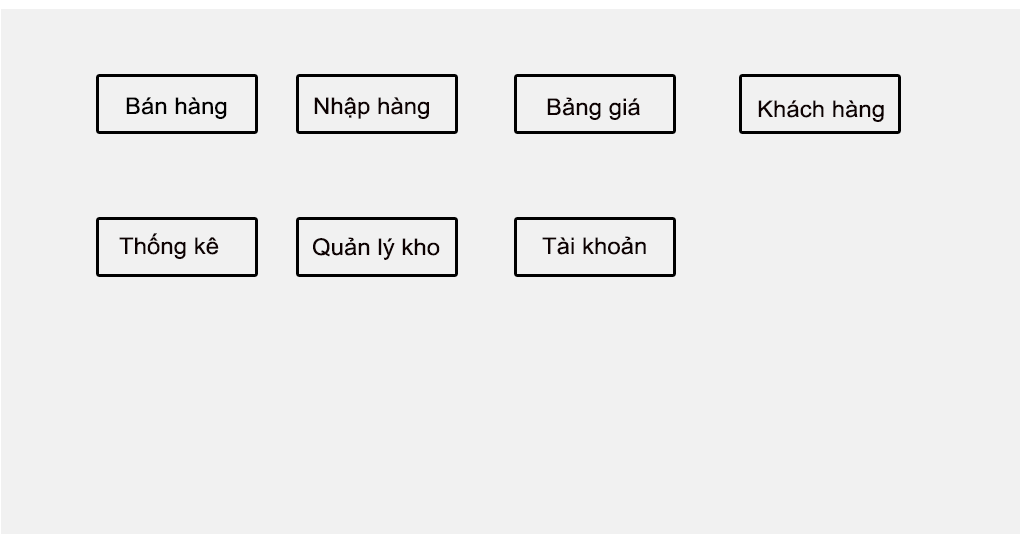
<style>
.page{position:relative;width:1020px;height:534px;background:#f1f1f1}
.page>*{position:absolute;margin:0}
.t1{font:23px "ArialMT";color:#000000;scale:1.04 1}
.t2{font:23px "ArialMT";color:#0e0202;scale:1.04 1}
</style>
<div class="page">
<p class="t1" style="left:126px;top:97px;width:101px;height:22px">Bán hàng</p>
<p class="t2" style="left:314px;top:97px;width:115px;height:22px">Nhập hàng</p>
<p class="t2" style="left:547px;top:97px;width:93px;height:23px">Bảng giá</p>
<p class="t2" style="left:758px;top:100px;width:126px;height:22px">Khách hàng</p>
<p class="t2" style="left:119px;top:233px;width:100px;height:26px">Thống kê</p>
<p class="t2" style="left:313px;top:237px;width:127px;height:23px">Quản lý kho</p>
<p class="t2" style="left:542px;top:236px;width:104px;height:19px">Tài khoản</p>
</div>
